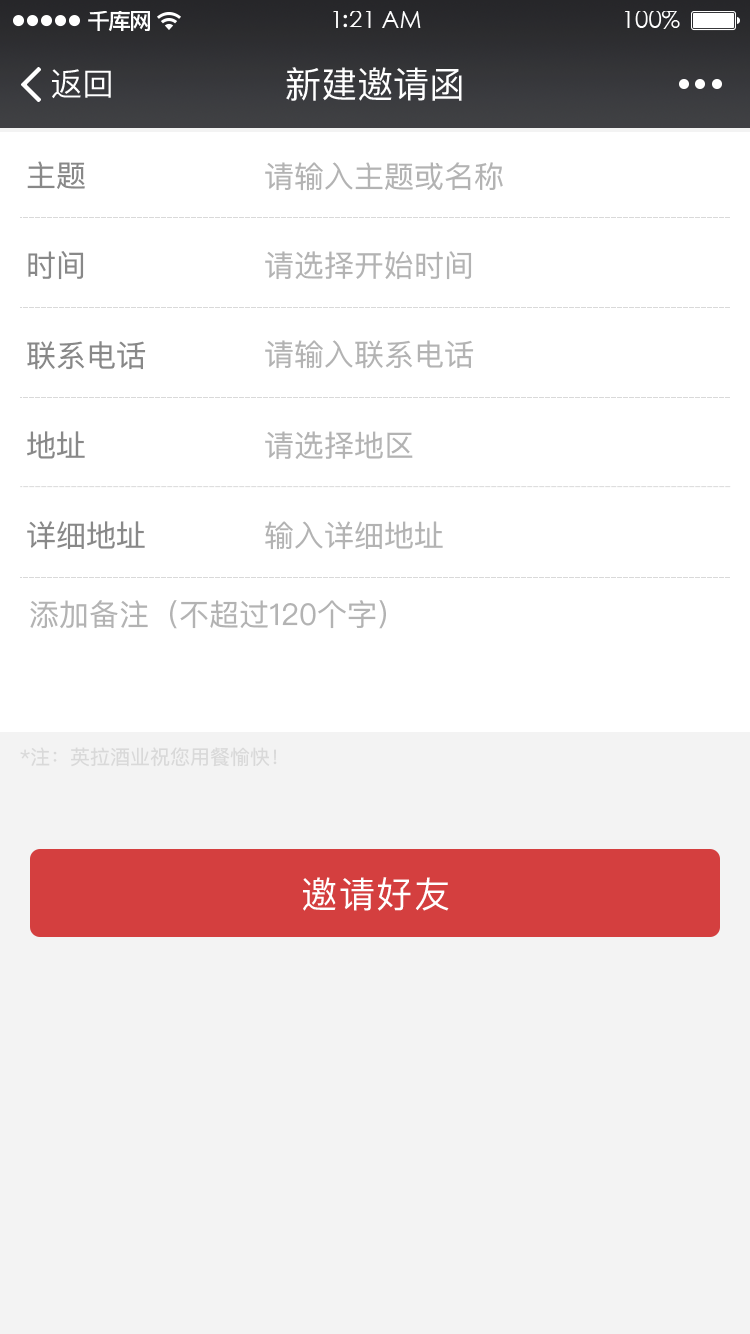
<style>
.page{position:relative;width:750px;height:1334px;background:#ffffff}
.page>*{position:absolute;margin:0}
.t1{font:32px "PingFangSC-Regular";color:#ffffff}
.t2{font:36px "PingFangSC-Regular";color:#ffffff}
.t3{font:30px "PingFangSC-Regular";color:#888888}
.t4{font:30px "PingFangSC-Regular";color:#b3b3b3}
.t5{font:30.3px "PingFangSC-Regular";color:#888888}
.t6{font:30.2px "PingFangSC-Regular";color:#888888}
.t7{font:29.9px "PingFangSC-Regular";color:#b3b3b3}
.t8{font:20px "PingFangSC-Regular";color:#d9d9d9}
.t9{font:36px "PingFangSC-Regular";letter-spacing:0.05em;color:#ffffff}
</style>
<div class="page">
<p class="t1" style="left:52px;top:69px;width:59px;height:30px">返回</p>
<p class="t2" style="left:286px;top:67px;width:176px;height:34px">新建邀请函</p>
<p class="t3" style="left:27px;top:161px;width:58px;height:28px">主题</p>
<p class="t4" style="left:265px;top:162px;width:238px;height:29px">请输入主题或名称</p>
<p class="t5" style="left:28px;top:251px;width:56px;height:29px">时间</p>
<p class="t4" style="left:265px;top:251px;width:207px;height:29px">请选择开始时间</p>
<p class="t5" style="left:27px;top:341px;width:119px;height:29px">联系电话</p>
<p class="t4" style="left:265px;top:340px;width:209px;height:29px">请输入联系电话</p>
<p class="t6" style="left:27px;top:431px;width:58px;height:28px">地址</p>
<p class="t7" style="left:265px;top:431px;width:148px;height:29px">请选择地区</p>
<p class="t6" style="left:27px;top:521px;width:118px;height:29px">详细地址</p>
<p class="t7" style="left:265px;top:521px;width:178px;height:29px">输入详细地址</p>
<p class="t4" style="left:30px;top:600px;width:356px;height:29px">添加备注（不超过120个字）</p>
<p class="t8" style="left:20px;top:747px;width:257px;height:20px">*注：英拉酒业祝您用餐愉快！</p>
<p class="t9" style="left:303px;top:877px;width:146px;height:34px">邀请好友</p>
</div>
